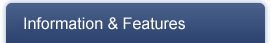
<style>
.page{position:relative;width:271px;height:43px}
.page>*{position:absolute;margin:0}
.t1{font:16px "ArialMT";color:#ffffff}
</style>
<div class="page">
<p class="t1" style="left:24px;top:17px;width:161px;height:13px">Information &amp; Features</p>
</div>
